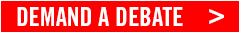
<style>
.page{position:relative;width:240px;height:33px;background:#ff0000}
.page>*{position:absolute;margin:0}
.t1{font:25.8px "TradeGothic-BoldCondTwenty";color:#ffffff}
.t2{font:29.2px "TradeGothic-BoldCondTwenty";color:#ffffff}
</style>
<div class="page">
<p class="t1" style="left:17px;top:7px;width:166px;height:19px">DEMAND A DEBATE</p>
<p class="t2" style="left:209px;top:9px;width:15px;height:15px">&gt;</p>
</div>
